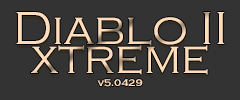
<style>
.page{position:relative;width:240px;height:100px;background:#333333}
.page>*{position:absolute;margin:0}
.t1{font:48px/29px "CopperplateGothic-Light";color:#ffddbb}
.t2{font:10px "CopperplateGothic-Bold";color:#ffddbb}
</style>
<div class="page">
<p class="t1" style="left:16px;top:12px;width:209px;height:63px;text-align:center">Diablo II<br>xtreme</p>
<p class="t2" style="left:97px;top:79px;width:46px;height:8px">v5.0429</p>
</div>
